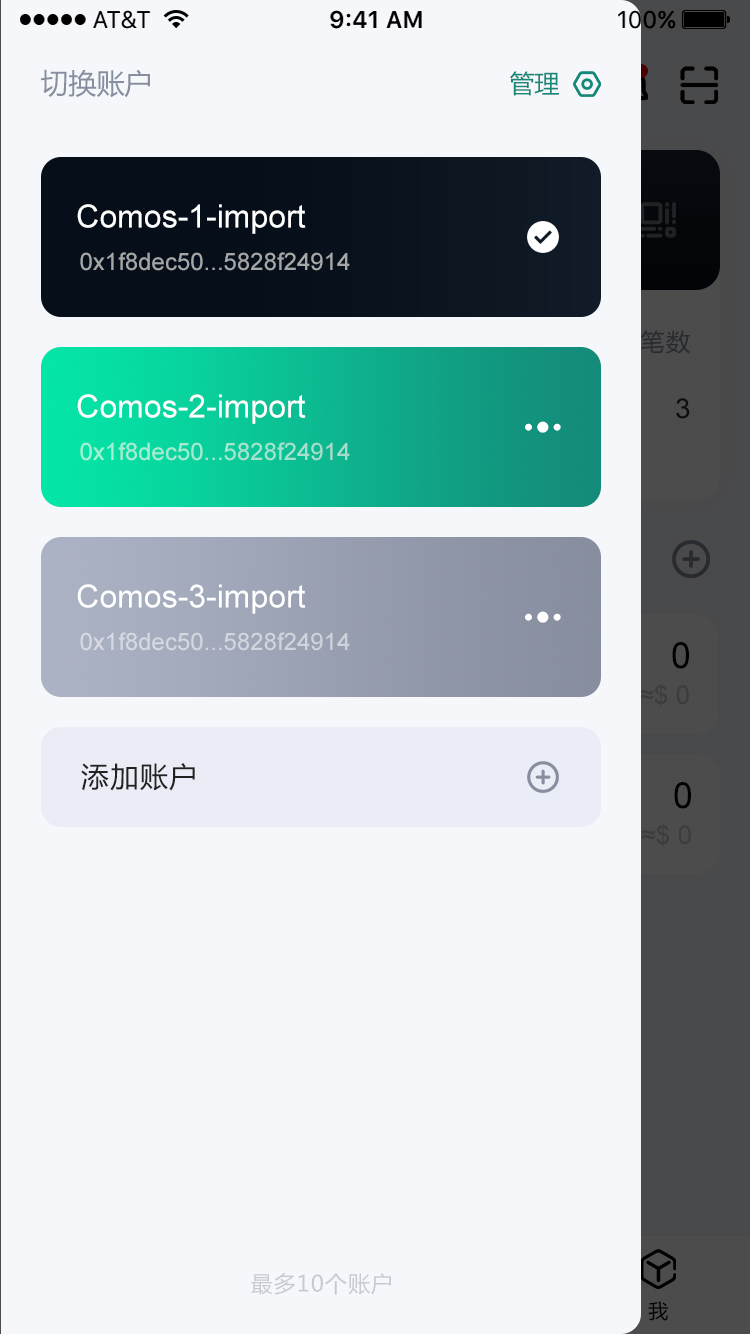
<style>
.page{position:relative;width:750px;height:1334px;background:#f6f7fb}
.page>*{position:absolute;margin:0}
.t1{font:28px "MicrosoftYaHei";color:#878e9f}
.t2{font:25px "MicrosoftYaHei";color:#158878}
.t3{font:32px "ArialMT";color:#ffffff}
.t4{font:24px "ArialMT";color:#a5a6a8}
.t5{font:24px "ArialMT";color:#a5e6d0}
.t6{font:24px "ArialMT";color:#d3d6de}
.t7{font:28px "MicrosoftYaHei";letter-spacing:0.05em;color:#222222}
.t8{font:22px "MicrosoftYaHei";letter-spacing:0.05em;color:#c8cad2}
</style>
<div class="page">
<p class="t1" style="left:40px;top:69px;width:110px;height:29px">切换账户</p>
<p class="t2" style="left:510px;top:71px;width:49px;height:25px">管理</p>
<p class="t3" style="left:77px;top:204px;width:229px;height:30px">Comos-1-import</p>
<p class="t4" style="left:80px;top:252px;width:270px;height:19px">0x1f8dec50...5828f24914</p>
<p class="t3" style="left:77px;top:394px;width:229px;height:30px">Comos-2-import</p>
<p class="t5" style="left:80px;top:442px;width:270px;height:19px">0x1f8dec50...5828f24914</p>
<p class="t3" style="left:77px;top:584px;width:229px;height:30px">Comos-3-import</p>
<p class="t6" style="left:80px;top:632px;width:270px;height:19px">0x1f8dec50...5828f24914</p>
<p class="t7" style="left:81px;top:763px;width:114px;height:28px">添加账户</p>
<p class="t8" style="left:251px;top:1273px;width:140px;height:22px">最多10个账户</p>
</div>
